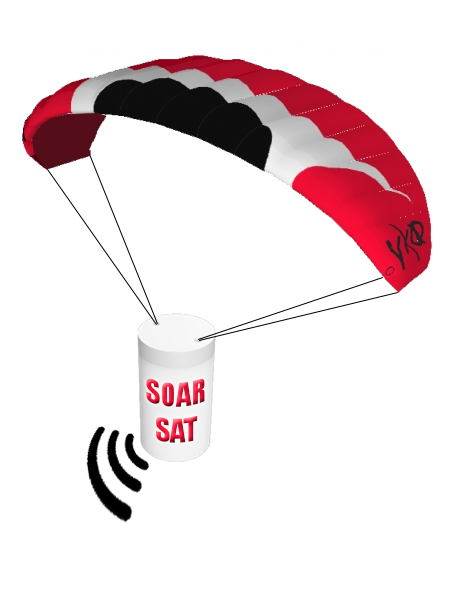
<style>
.page{position:relative;width:454px;height:595px;background:#ffffff}
.page>*{position:absolute;margin:0}
.t1{font:29.9px "Impact";font-variant:small-caps;scale:0.97 1}
</style>
<div class="page">
<p class="t1" style="left:146px;top:378px;width:59px;height:65px;text-align:center">SOARSAT</p>
</div>
